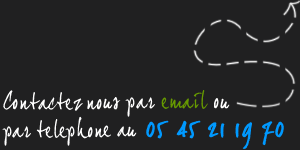
<style>
.page{position:relative;width:300px;height:150px;background:#202021}
.page>*{position:absolute;margin:0}
.t1{font:22px/28px "JoeHand2";color:#ffffff}
.t2{font:22px/28px "JoeHand2";color:#669900}
.t3{font:26px/28px "JoeHand2";color:#0099ff;font-weight:bold}
</style>
<div class="page">
<p class="t1" style="left:2px;top:90px;width:282px;height:59px">Contactez nous par <span class="t2">email</span> ou <br>par telephone au <span class="t3">05 45 21 19 70</span></p>
</div>
